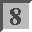
<style>
.page{position:relative;width:32px;height:32px;background:#bbbbbb}
.page>*{position:absolute;margin:0}
.t1{font:25px "TimesNewRomanPS-BoldMT";color:#474642}
</style>
<div class="page">
<p class="t1" style="left:10px;top:8px;width:11px;height:17px">8</p>
</div>
